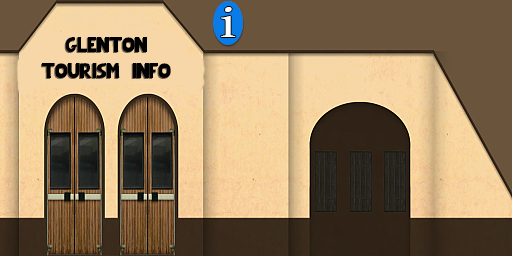
<style>
.page{position:relative;width:512px;height:256px}
.page>*{position:absolute;margin:0}
.t1{font:45.6px "GentiumBasic";color:#ffffff;scale:1.46 1}
.t2{font:21.4px "Chunk-Regular";color:#000000}
</style>
<div class="page">
<p class="t1" style="left:221px;top:7px;width:15px;height:30px">i</p>
<p class="t2" style="left:42px;top:37px;width:129px;height:41px;text-align:center">Glenton<br>Tourism   Info</p>
</div>
